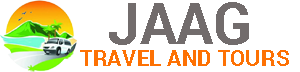
<style>
.page{position:relative;width:300px;height:72px;background:#ffffff}
.page>*{position:absolute;margin:0}
.t1{font:57.7px "Roboto-Bold";color:#726c6c}
.t2{font:22.5px "Roboto-Bold";color:#fd7104}
</style>
<div class="page">
<p class="t1" style="left:109px;top:2px;width:140px;height:43px">JAAG</p>
<p class="t2" style="left:80px;top:50px;width:209px;height:16px">TRAVEL AND TOURS</p>
</div>
